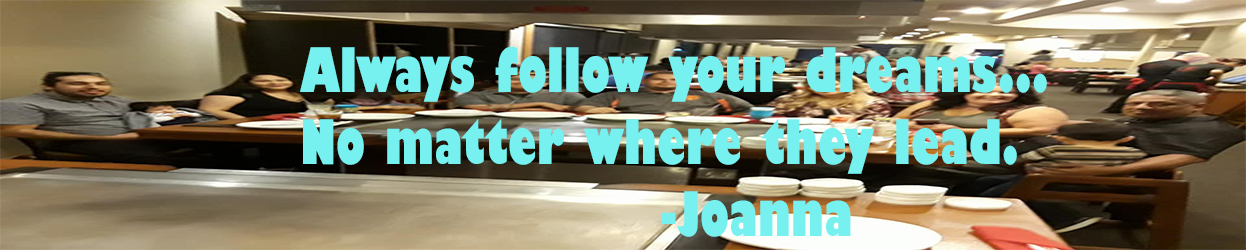
<style>
.page{position:relative;width:1246px;height:250px}
.page>*{position:absolute;margin:0}
.t1{font:60px "GillSans-UltraBoldCondensed";color:#76f1f0}
</style>
<div class="page">
<p class="t1" style="left:300px;top:46px;width:747px;height:191px">Always follow your dreams...<br>No matter where they lead.<br>          -Joanna</p>
</div>
